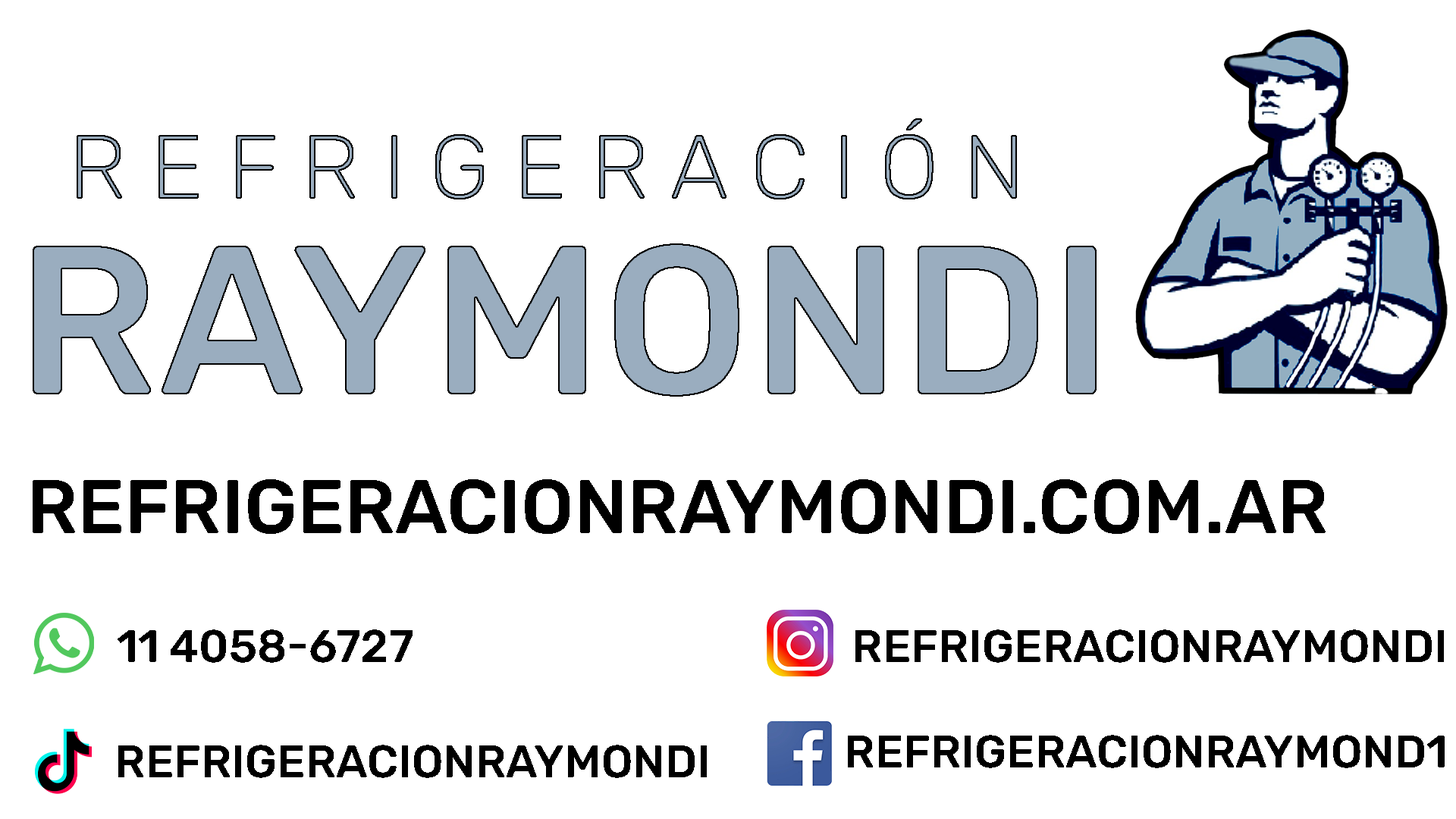
<style>
.page{position:relative;width:1456px;height:819px;background:#ffffff}
.page>*{position:absolute;margin:0}
.t1{font:91px "Rubik-Light";text-transform:uppercase}
.t2{font:212.3px "Rubik-Medium";color:#9aadbf;text-transform:uppercase}
.t3{font:75.8px "Rubik-Medium";color:#000000;text-transform:uppercase}
.t4{font:45.5px "Rubik-Medium";color:#000000;text-transform:uppercase}
</style>
<div class="page">
<p class="t1" style="left:77px;top:118px;width:940px;height:81px">r e f r i g e r a c i ó n</p>
<p class="t2" style="left:33px;top:243px;width:1064px;height:154px">RAYMONDI</p>
<p class="t3" style="left:33px;top:479px;width:1293px;height:55px">refrigeracionraymondi.com.ar</p>
<p class="t4" style="left:118px;top:629px;width:295px;height:34px">11 4058-6727</p>
<p class="t4" style="left:855px;top:629px;width:589px;height:34px">refrigeracionraymondi</p>
<p class="t4" style="left:848px;top:735px;width:597px;height:33px">refrigeracionraymond1</p>
<p class="t4" style="left:118px;top:745px;width:589px;height:33px">refrigeracionraymondi</p>
</div>
